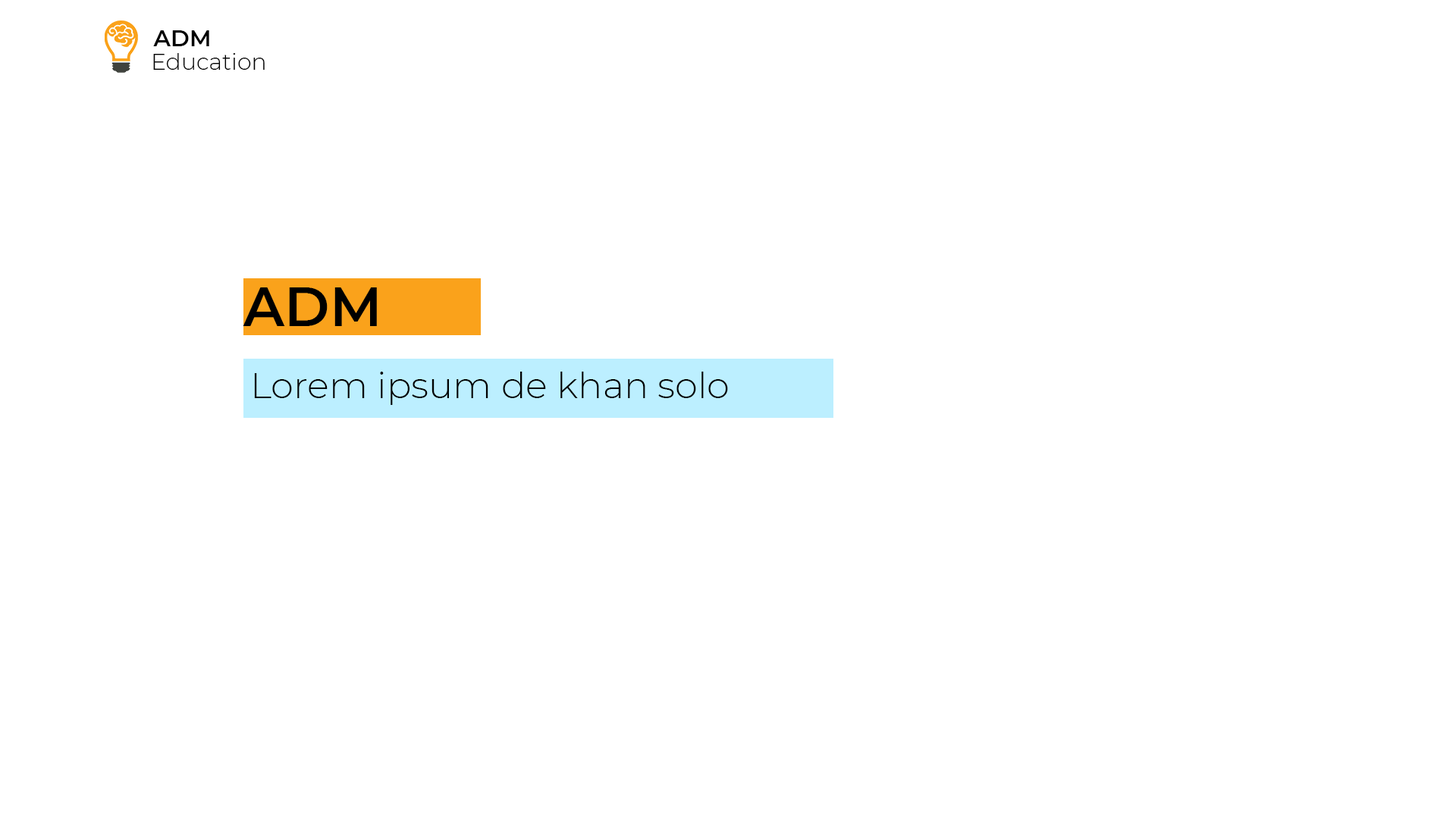
<style>
.page{position:relative;width:1456px;height:819px;background:#ffffff}
.page>*{position:absolute;margin:0}
.t1{font:22.7px "Montserrat-SemiBold";color:#000000}
.t2{font:22.7px "Montserrat-Light";color:#000000}
.t3{font:54.6px "Montserrat-SemiBold";color:#000000}
.t4{font:36.4px "Montserrat-Light";color:#000000}
</style>
<div class="page">
<p class="t1" style="left:153px;top:30px;width:56px;height:16px">ADM</p>
<p class="t2" style="left:153px;top:53px;width:112px;height:17px">Education</p>
<p class="t3" style="left:243px;top:287px;width:134px;height:39px">ADM</p>
<p class="t4" style="left:254px;top:372px;width:474px;height:33px">Lorem ipsum de khan solo</p>
</div>
